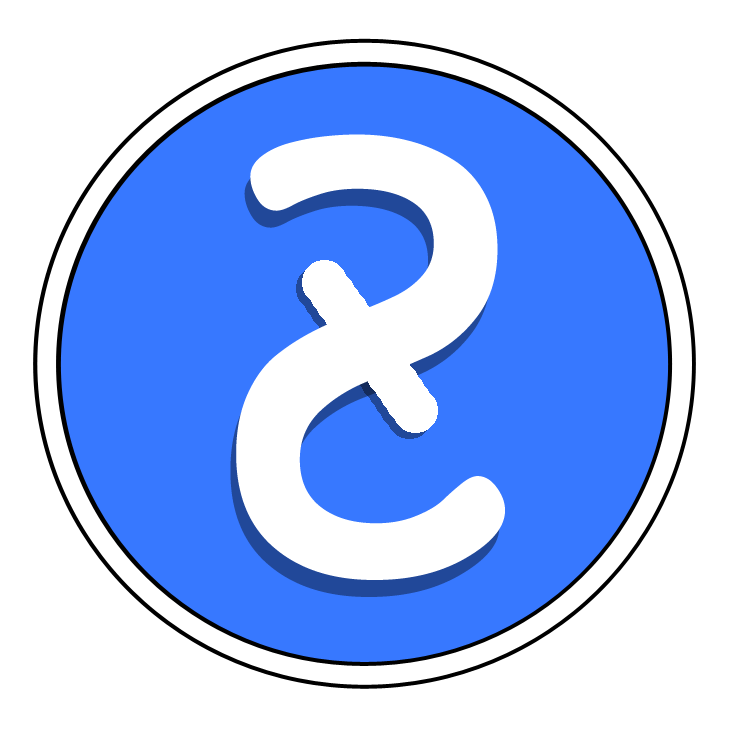
<style>
.page{position:relative;width:729px;height:729px;background:#ffffff}
.page>*{position:absolute;margin:0}
.t1{font:600px "Dosis-SemiBold";color:#ffffff}
</style>
<div class="page">
<p class="t1" style="left:236px;top:134px;width:269px;height:446px;rotate:-179deg">S</p>
<p class="t1" style="left:230px;top:151px;width:270px;height:446px;rotate:-179deg">S</p>
</div>
